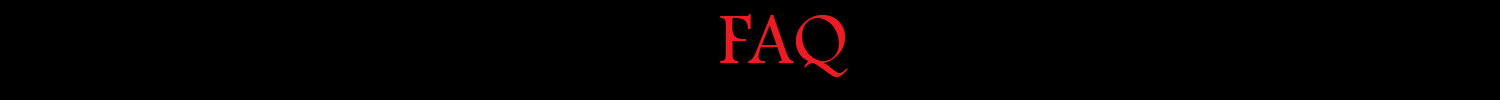
<style>
.page{position:relative;width:1500px;height:100px;background:#000000}
.page>*{position:absolute;margin:0}
.t1{font:75px "FootlightMTLight";color:#ed1c24}
</style>
<div class="page">
<p class="t1" style="left:720px;top:14px;width:128px;height:63px">FAQ</p>
</div>
